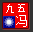
<style>
.page{position:relative;width:33px;height:32px;background:#f20000}
.page>*{position:absolute;margin:0}
.t1{font:10.4px "SimSun";color:#ffffff}
.t2{font:11.7px "SimSun";color:#ffffff}
</style>
<div class="page">
<p class="t1" style="left:6px;top:4px;width:19px;height:9px">九五</p>
<p class="t2" style="left:16px;top:15px;width:11px;height:12px">冯</p>
</div>
